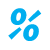
<style>
.page{position:relative;width:50px;height:50px;background:#ffffff}
.page>*{position:absolute;margin:0}
.t1{font:50px "SourceCodePro-Black";letter-spacing:0.2em;color:#00aeef}
</style>
<div class="page">
<p class="t1" style="left:8px;top:8px;width:34px;height:33px">%</p>
</div>
